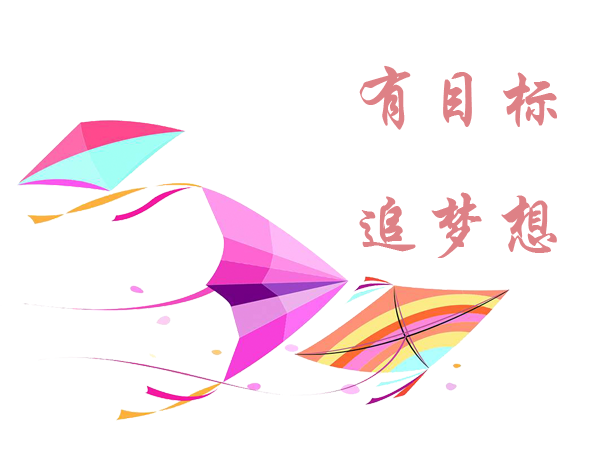
<style>
.page{position:relative;width:614px;height:467px;background:#ffffff}
.page>*{position:absolute;margin:0}
.t1{font:72px "STXingkai";color:#de8186}
</style>
<div class="page">
<p class="t1" style="left:359px;top:65px;width:198px;height:193px">有目标<br>追梦想</p>
</div>
